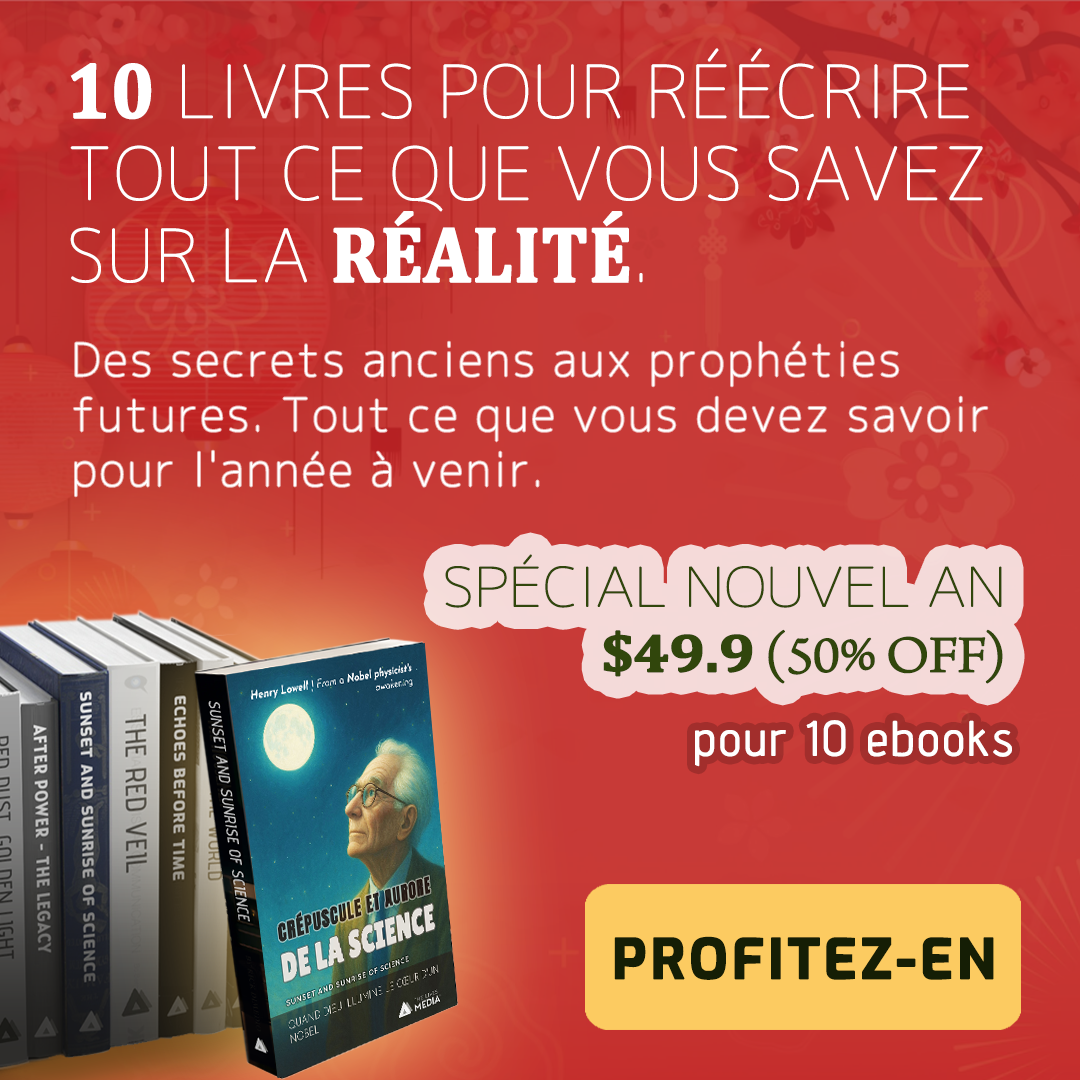
<style>
.page{position:relative;width:1080px;height:1080px}
.page>*{position:absolute;margin:0}
.t1{font:72px/82px "Chogokuboso-Gothic";color:#ffffff;font-weight:bold}
.t2{font:79.2px/82px "Cambria-Bold";color:#ffffff;font-weight:bold;scale:0.91 1}
.t3{font:45px/55px "Chogokuboso-Gothic";letter-spacing:0.05em;color:#ffffff;font-weight:bold}
.t4{font:54px/65px "Chogokuboso-Gothic";letter-spacing:-0.025em;color:#31460c;font-weight:bold;scale:1.11 1}
.t5{font:54px/65px "Cambria-Bold";letter-spacing:-0.025em;color:#31460c;font-weight:bold;scale:1.11 1}
.t6{font:54px/65px "ArnoPro-LightDisplay";letter-spacing:-0.025em;color:#31460c;font-weight:bold;scale:1.11 1}
.t7{font:48px "AdventPro-Regular";letter-spacing:0.05em;color:#ffffff;font-weight:bold}
.t8{font:55px "Exo-Bold";letter-spacing:0.05em;color:#151e05;font-weight:bold}
</style>
<div class="page">
<p class="t1" style="left:70px;top:48px;width:913px;height:235px"><span class="t2">10 </span>LIVRES POUR RÉÉCRIRE TOUT CE QUE VOUS SAVEZ SUR LA <span class="t2">RÉALITÉ</span>.</p>
<p class="t3" style="left:74px;top:341px;width:914px;height:156px">Des secrets anciens aux prophéties futures. Tout ce que vous devez savoir pour l'année à venir.</p>
<p class="t4" style="left:445px;top:554px;width:558px;height:130px;text-align:right">SPÉCIAL NOUVEL AN <span class="t5">$49.9</span><span class="t6"> (50% OFF)</span></p>
<p class="t7" style="left:695px;top:720px;width:317px;height:47px">pour 10 ebooks</p>
<p class="t8" style="left:614px;top:936px;width:380px;height:44px">PROFITEZ-EN</p>
</div>
